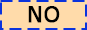
<style>
.page{position:relative;width:87px;height:30px;background:#ffdbaa}
.page>*{position:absolute;margin:0}
.t1{font:21px "Verdana";color:#000000;font-weight:bold}
</style>
<div class="page">
<p class="t1" style="left:28px;top:6px;width:32px;height:17px">NO</p>
</div>
